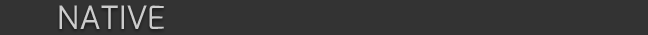
<style>
.page{position:relative;width:648px;height:35px;background:#333333}
.page>*{position:absolute;margin:0}
.t1{font:32px "Exo-Regular";color:#cccccc;text-transform:uppercase}
</style>
<div class="page">
<p class="t1" style="left:59px;top:5px;width:105px;height:24px">native</p>
</div>
